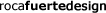
<style>
.page{position:relative;width:106px;height:13px;background:#ffffff}
.page>*{position:absolute;margin:0}
.t1{font:12px "Verdana-Bold";color:#000000}
.t2{font:12px "Verdana";color:#000000}
.t3{font:12px "Verdana";color:#000000;font-weight:bold}
</style>
<div class="page">
<p class="t1" style="left:0px;top:0px;width:106px;height:13px"><span class="t2">roca</span>fuerte<span class="t3">design</span></p>
</div>
